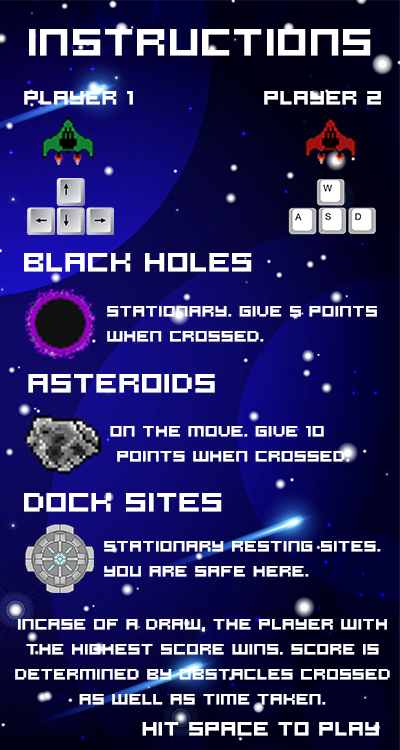
<style>
.page{position:relative;width:400px;height:750px}
.page>*{position:absolute;margin:0}
.t1{font:41.7px "Hooge0553";color:#ffffff;font-weight:bold}
.t2{font:20.8px "Hooge0553";color:#ffffff;font-weight:bold}
.t3{font:29.2px "Hooge0553";color:#ffffff;font-weight:bold}
.t4{font:16.7px/25px "Hooge0553";color:#ffffff;font-weight:bold}
</style>
<div class="page">
<p class="t1" style="left:29px;top:29px;width:342px;height:27px">Instructions</p>
<p class="t2" style="left:24px;top:91px;width:109px;height:14px">player 1</p>
<p class="t2" style="left:264px;top:91px;width:117px;height:14px">player 2</p>
<p class="t3" style="left:24px;top:253px;width:228px;height:19px">black holes</p>
<p class="t4" style="left:107px;top:306px;width:270px;height:36px">stationary. give 5 points<br>when crossed.</p>
<p class="t3" style="left:28px;top:374px;width:187px;height:19px">Asteroids</p>
<p class="t4" style="left:110px;top:426px;width:240px;height:36px">on the move. Give 10<br> points when crossed.</p>
<p class="t3" style="left:24px;top:493px;width:198px;height:19px">dock sites</p>
<p class="t4" style="left:104px;top:541px;width:277px;height:36px">stationary resting sites.<br>you are safe here.</p>
<p class="t4" style="left:15px;top:619px;width:375px;height:86px;text-align:center">incase of a draw, the player with<br>the highest score wins. score is<br>determined by obstacles crossed<br>as well as time taken.</p>
<p class="t2" style="left:142px;top:722px;width:237px;height:14px">hit space to play</p>
</div>
